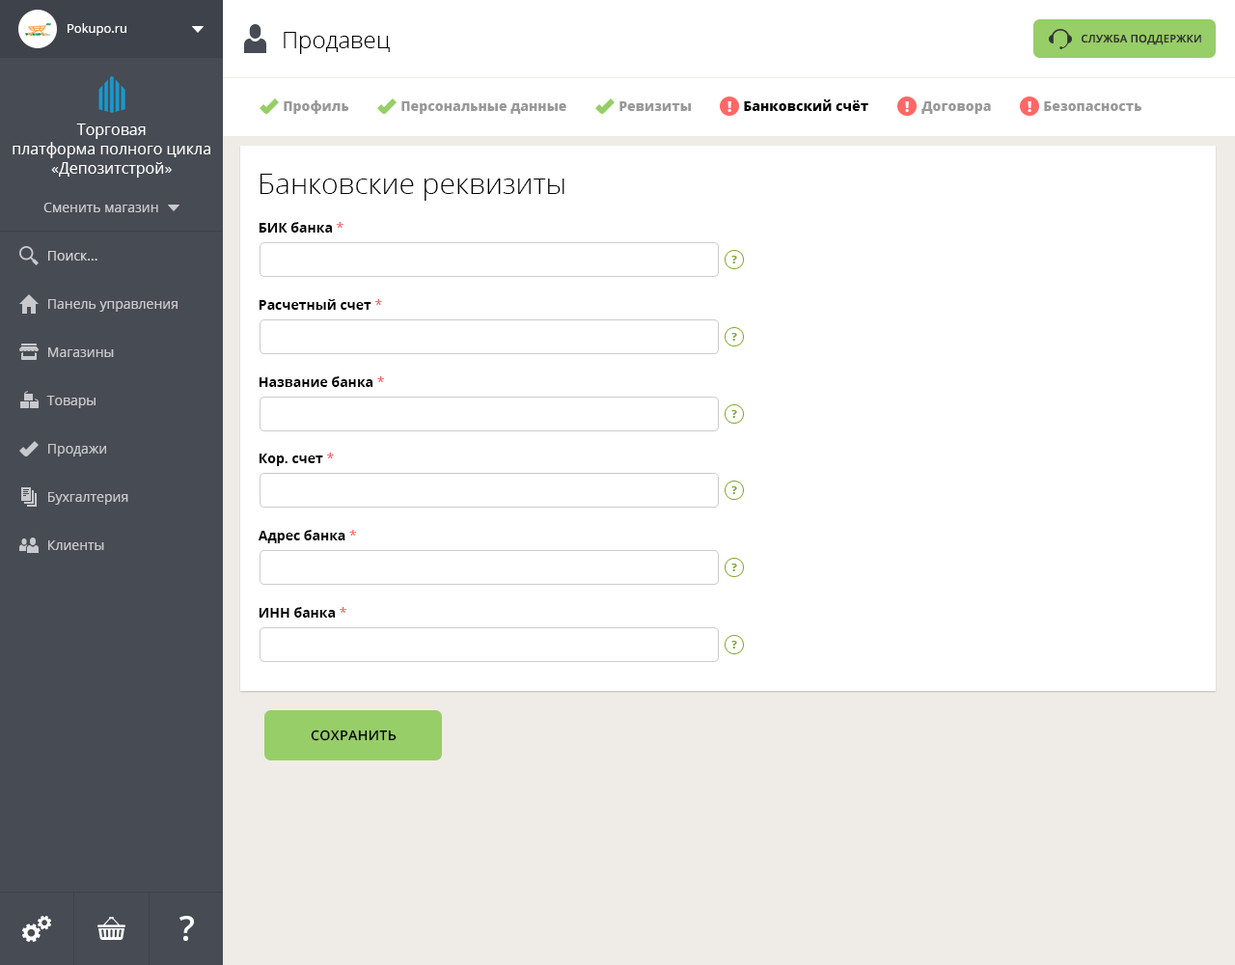
<style>
.page{position:relative;width:1235px;height:965px;background:#ffffff}
.page>*{position:absolute;margin:0}
.t1{font:12.5px "OpenSans";color:#ffffff}
.t2{font:23.2px "OpenSans-Light";color:#010101}
.t3{font:10.6px "OpenSans-Semibold";letter-spacing:0.025em;color:#333333;text-transform:uppercase}
.t4{font:13.5px "OpenSans-Extrabold";color:#999999}
.t5{font:13.5px "OpenSans-Extrabold";color:#000000}
.t6{font:15.4px/19.3px "OpenSans";color:#ffffff}
.t7{font:29px "OpenSans-Light";color:#000000}
.t8{font:13.5px "OpenSans";color:#c8c9cc}
.t9{font:13.5px "OpenSans-Bold";color:#000000}
.t10{font:13.5px "OpenSans";color:#fd5656}
.t11{font:13.5px "OpenSans";color:#d3d4d5}
.t12{font:10.6px "OpenSans-Extrabold";color:#7caa1f}
.t13{font:13.5px "OpenSans-Semibold";letter-spacing:0.025em;color:#000000;text-transform:uppercase}
</style>
<div class="page">
<p class="t1" style="left:68px;top:23px;width:58px;height:13px">Pokupo.ru</p>
<p class="t2" style="left:284px;top:32px;width:106px;height:22px">Продавец</p>
<p class="t3" style="left:1082px;top:34px;width:120px;height:11px">Служба поддержки</p>
<p class="t4" style="left:284px;top:100px;width:65px;height:14px">Профиль</p>
<p class="t4" style="left:402px;top:101px;width:165px;height:13px">Персональные данные</p>
<p class="t4" style="left:620px;top:101px;width:71px;height:10px">Ревизиты</p>
<p class="t5" style="left:744px;top:99px;width:125px;height:12px">Банковский счёт</p>
<p class="t4" style="left:922px;top:101px;width:69px;height:13px">Договора</p>
<p class="t4" style="left:1044px;top:101px;width:98px;height:10px">Безопасность</p>
<p class="t6" style="left:13px;top:124px;width:197px;height:54px;text-align:center">Торговая<br>платформа полного цикла<br>«Депозитстрой»</p>
<p class="t7" style="left:260px;top:174px;width:305px;height:27px">Банковские реквизиты</p>
<p class="t8" style="left:43px;top:203px;width:115px;height:9px">Сменить магазин</p>
<p class="t9" style="left:259px;top:222px;width:85px;height:11px">БИК банка <span class="t10">*</span></p>
<p class="t11" style="left:48px;top:251px;width:49px;height:10px">Поиск...</p>
<p class="t12" style="left:732px;top:256px;width:5px;height:7px">?</p>
<p class="t8" style="left:48px;top:299px;width:130px;height:13px">Панель управления</p>
<p class="t9" style="left:259px;top:299px;width:123px;height:11px">Расчетный счет <span class="t10">*</span></p>
<p class="t12" style="left:732px;top:333px;width:5px;height:8px">?</p>
<p class="t8" style="left:48px;top:347px;width:66px;height:10px">Магазины</p>
<p class="t9" style="left:259px;top:376px;width:125px;height:11px">Название банка <span class="t10">*</span></p>
<p class="t8" style="left:46px;top:396px;width:50px;height:12px">Товары</p>
<p class="t12" style="left:732px;top:410px;width:5px;height:8px">?</p>
<p class="t8" style="left:48px;top:444px;width:58px;height:13px">Продажи</p>
<p class="t9" style="left:259px;top:453px;width:75px;height:13px">Кор. счет <span class="t10">*</span></p>
<p class="t8" style="left:48px;top:492px;width:80px;height:13px">Бухгалтерия</p>
<p class="t12" style="left:732px;top:486px;width:5px;height:8px">?</p>
<p class="t9" style="left:258px;top:530px;width:99px;height:13px">Адрес банка <span class="t10">*</span></p>
<p class="t8" style="left:48px;top:541px;width:56px;height:9px">Клиенты</p>
<p class="t12" style="left:732px;top:564px;width:5px;height:7px">?</p>
<p class="t9" style="left:259px;top:607px;width:88px;height:11px">ИНН банка <span class="t10">*</span></p>
<p class="t12" style="left:732px;top:641px;width:5px;height:8px">?</p>
<p class="t13" style="left:311px;top:730px;width:86px;height:11px">Сохранить</p>
</div>
